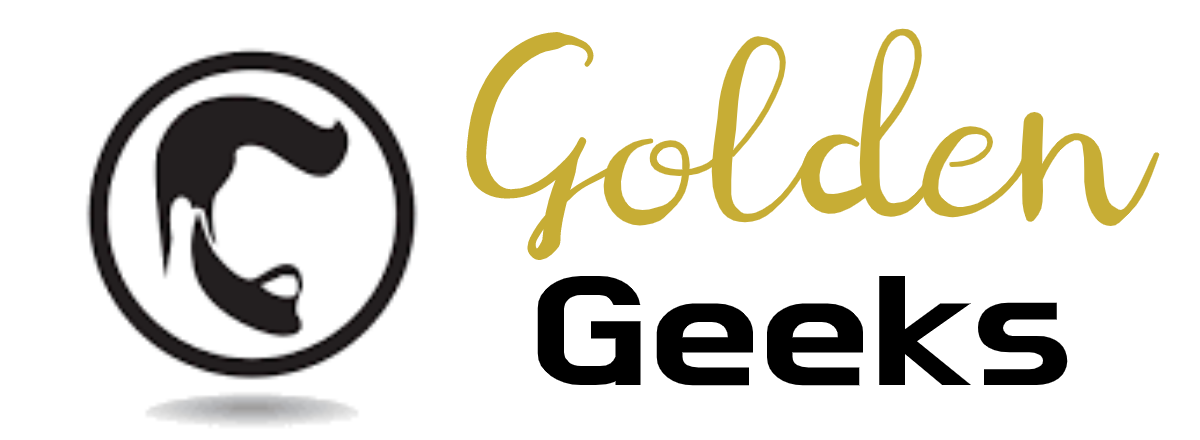
<style>
.page{position:relative;width:1200px;height:440px;background:#ffffff}
.page>*{position:absolute;margin:0}
.t1{font:126px "Digory_Doodles_PS";color:#c7ad35}
.t2{font:160px "DoHyeon-Regular";color:#000000;scale:1.36 1}
</style>
<div class="page">
<p class="t1" style="left:466px;top:28px;width:694px;height:233px">Golden</p>
<p class="t2" style="left:537px;top:276px;width:531px;height:110px">Geeks</p>
</div>
